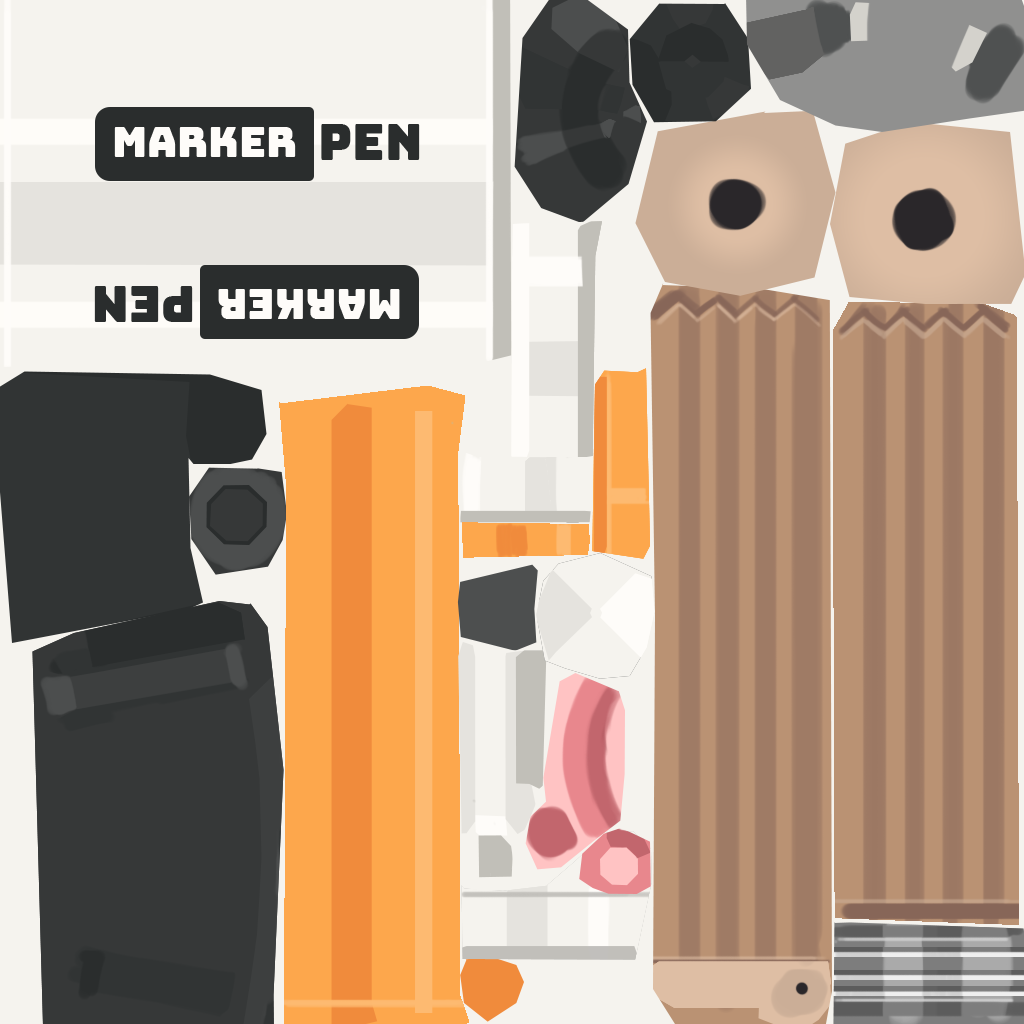
<style>
.page{position:relative;width:1024px;height:1024px}
.page>*{position:absolute;margin:0}
.t1{font:50px "Bungee-Regular";color:#2a2d2d}
.t2{font:41.7px "Bungee-Regular";color:#fefcf9}
</style>
<div class="page">
<p class="t1" style="left:321px;top:124px;width:99px;height:36px">PEN</p>
<p class="t2" style="left:114px;top:127px;width:182px;height:30px">MARKER</p>
<p class="t1" style="left:94px;top:286px;width:99px;height:36px;rotate:180deg">PEN</p>
<p class="t2" style="left:218px;top:289px;width:182px;height:30px;rotate:180deg">MARKER</p>
</div>
